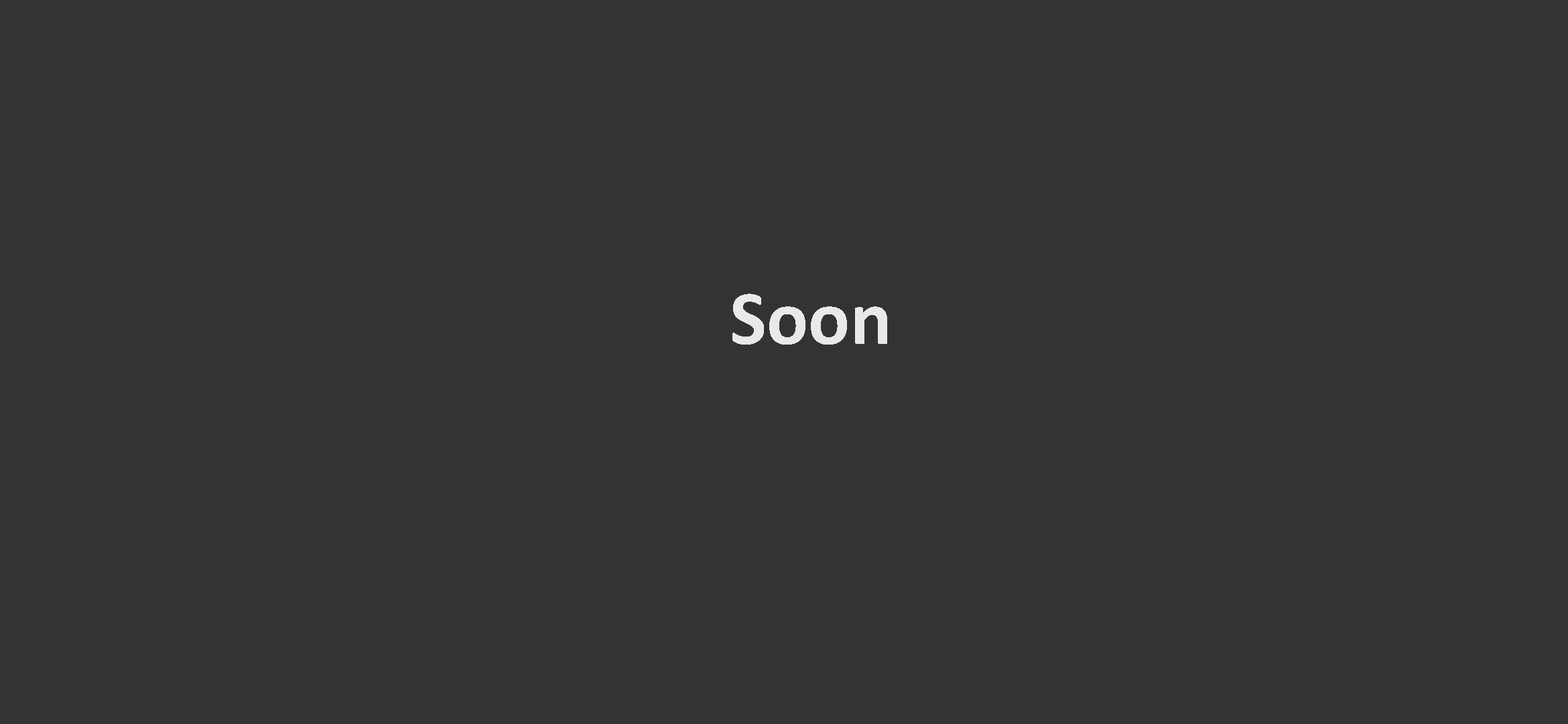
<style>
.page{position:relative;width:1568px;height:724px;background:#333333}
.page>*{position:absolute;margin:0}
.t1{font:77.6px "Calibri-Bold";color:#ffffff}
</style>
<div class="page">
<p class="t1" style="left:732px;top:293px;width:155px;height:51px;opacity:0.89">Soon</p>
</div>
